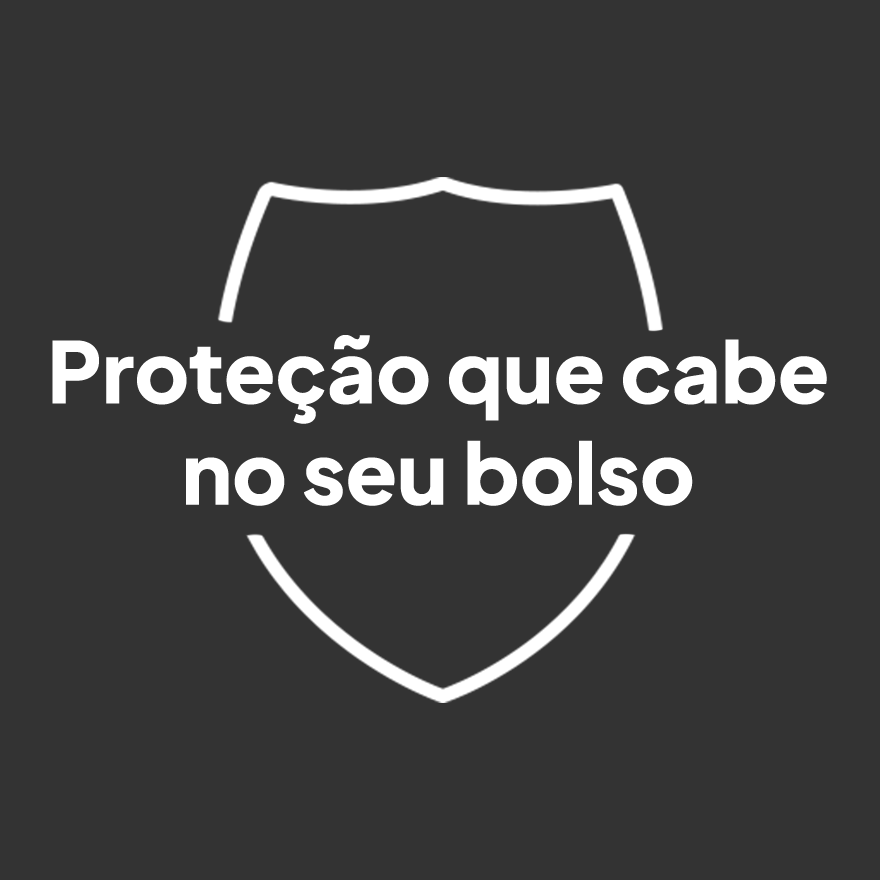
<style>
.page{position:relative;width:880px;height:880px;background:#333333}
.page>*{position:absolute;margin:0}
.t1{font:84.4px "PlusJakartaSans-ExtraBold";color:#ffffff}
</style>
<div class="page">
<p class="t1" style="left:52px;top:335px;width:775px;height:171px;text-align:center">Proteção que cabe<br>no seu bolso</p>
</div>
